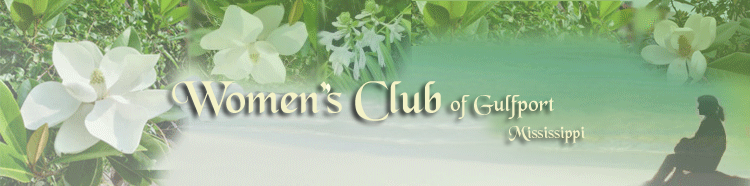
<style>
.page{position:relative;width:750px;height:186px}
.page>*{position:absolute;margin:0}
.t1{font:48px "BlackChancery";color:#f3f2c7}
.t2{font:24px "BlackChancery";color:#f3f2c7}
.t3{font:18px "BlackChancery";color:#f3f2c7}
</style>
<div class="page">
<p class="t1" style="left:172px;top:81px;width:269px;height:40px">Women’s Club</p>
<p class="t2" style="left:450px;top:95px;width:105px;height:24px">of Gulfport</p>
<p class="t3" style="left:508px;top:126px;width:77px;height:18px">Mississippi</p>
</div>
